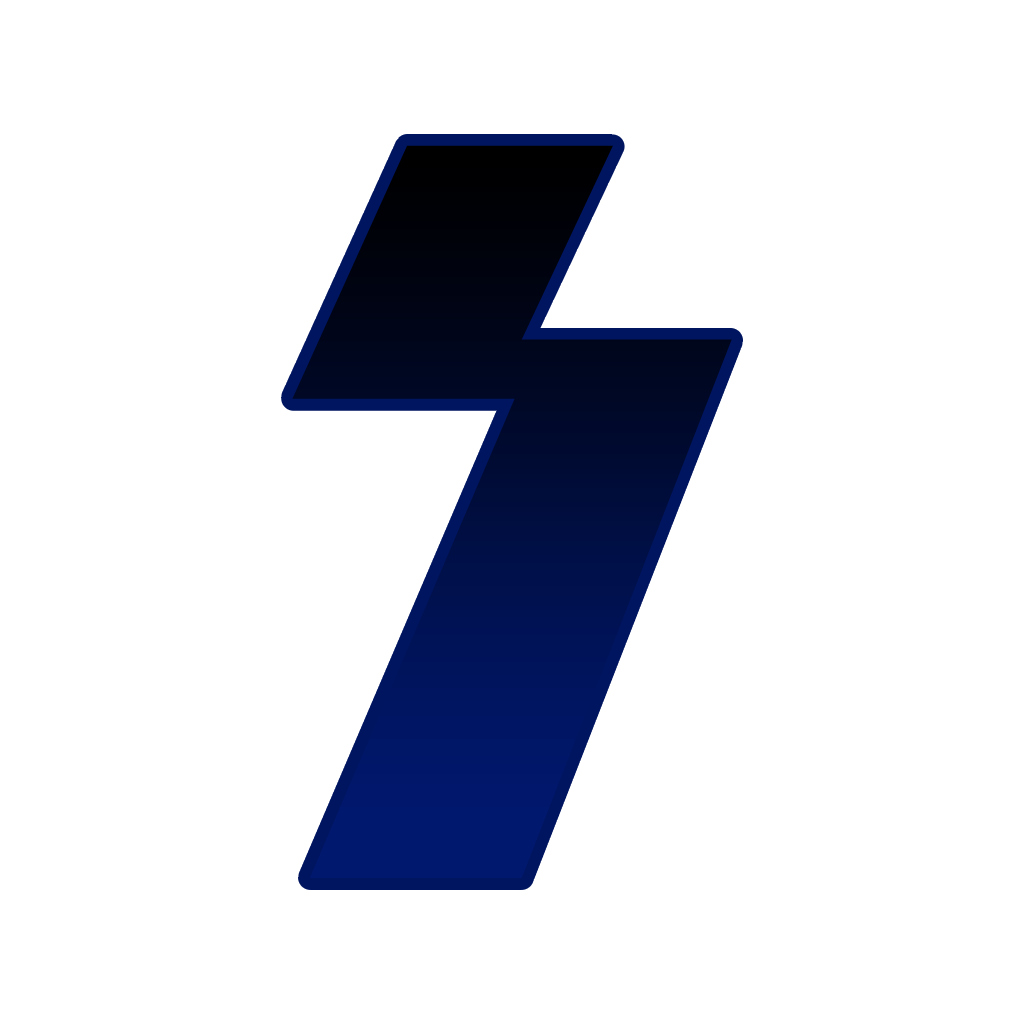
<style>
.page{position:relative;width:1024px;height:1024px;background:#ffffff}
.page>*{position:absolute;margin:0}
.t1{font:1024px "DieNasty"}
</style>
<div class="page">
<p class="t1" style="left:292px;top:145px;width:440px;height:734px">S</p>
</div>
